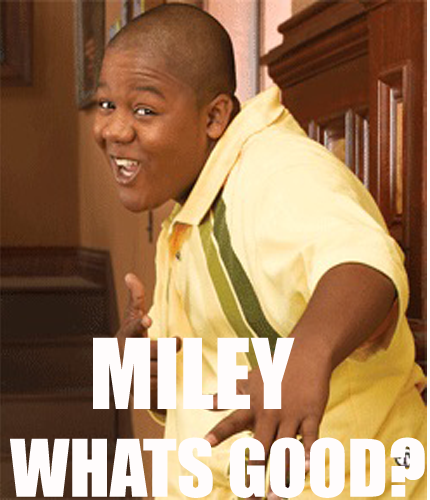
<style>
.page{position:relative;width:430px;height:500px}
.page>*{position:absolute;margin:0}
.t1{font:73px "Impact";color:#fffcfc}
.t2{font:90px "Impact";color:#ffffff}
.t3{font:90px "Impact";color:#fffcfc}
</style>
<div class="page">
<p class="t1" style="left:10px;top:337px;width:415px;height:161px"><span class="t2">     </span><span class="t3">MILEY<br></span>WHATS GOOD?</p>
</div>
